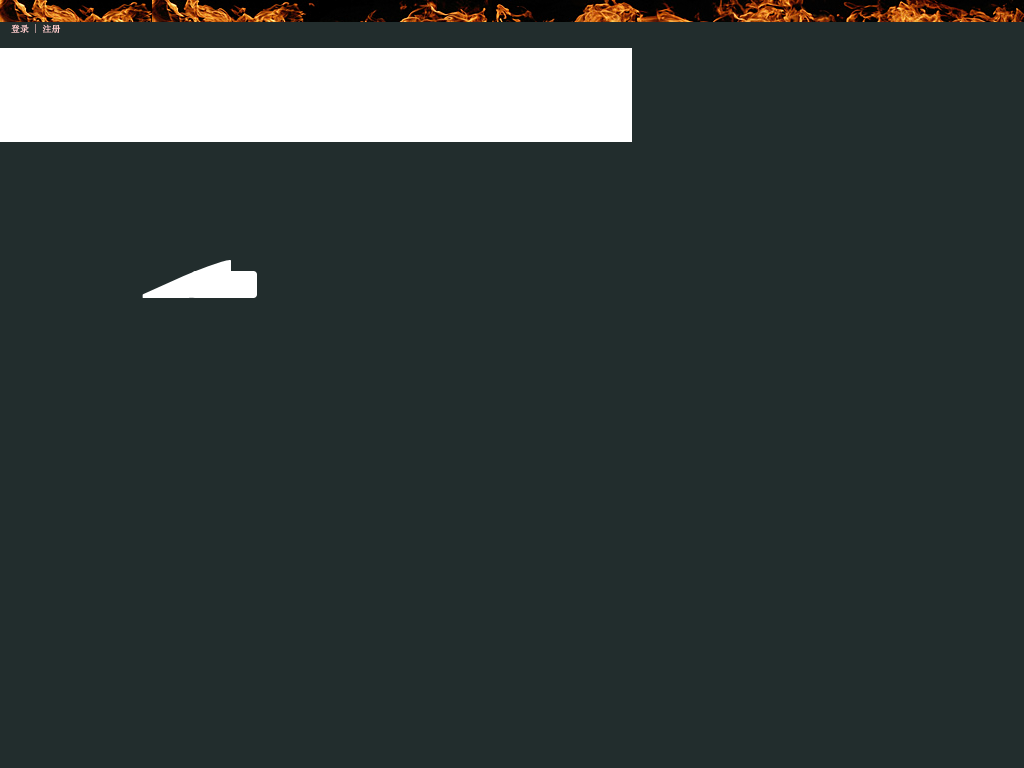
<style>
.page{position:relative;width:1024px;height:768px;background:#222d2d}
.page>*{position:absolute;margin:0}
.t1{font:9px "NSimSun";color:#ffcccc}
</style>
<div class="page">
<p class="t1" style="left:11px;top:24px;width:50px;height:9px">登录 | 注册</p>
</div>
